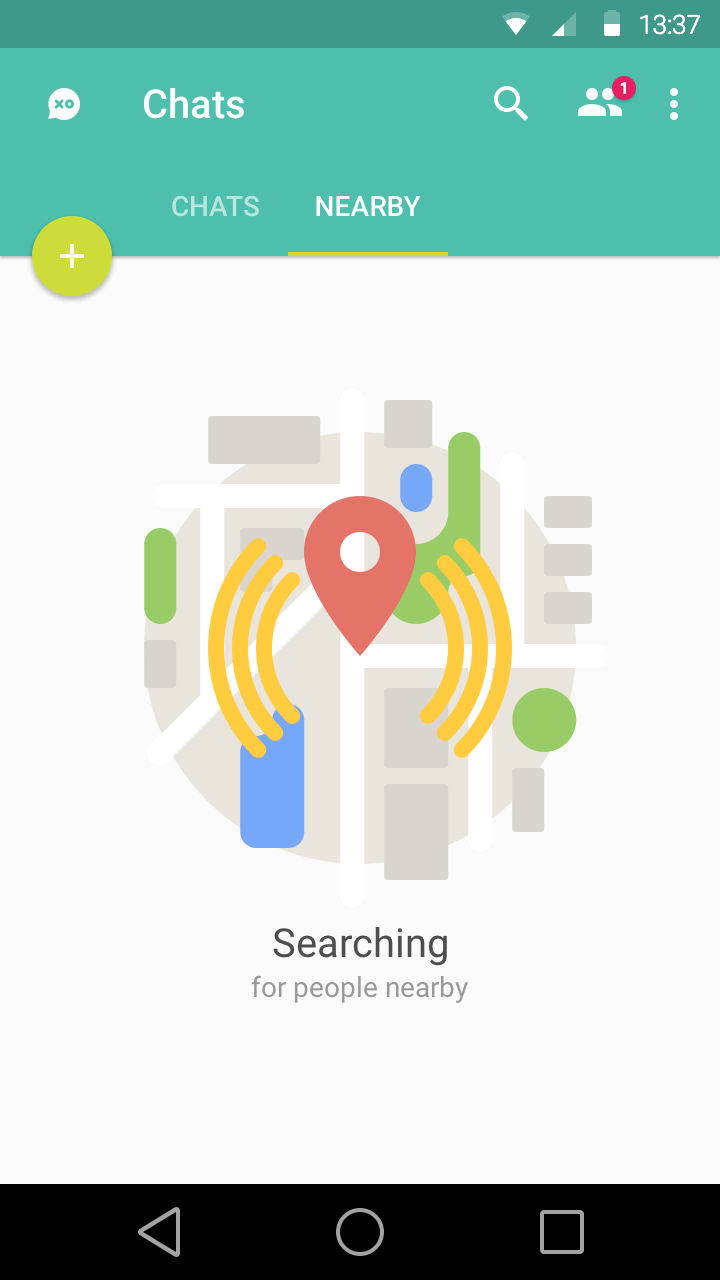
<style>
.page{position:relative;width:720px;height:1280px;background:#fafafa}
.page>*{position:absolute;margin:0}
.t1{font:26.1px "Roboto-Light";color:#ffffff}
.t2{font:40px "Roboto-Medium";color:#ffffff}
.t3{font:16px "Roboto-Medium";color:#ffffff}
.t4{font:28px "Roboto-Medium";color:#b8e5de;text-transform:uppercase}
.t5{font:28px "Roboto-Medium";color:#ffffff;text-transform:uppercase}
.t6{font:40px "Roboto-Regular";color:#4d4d4d}
.t7{font:28px "Roboto-Regular";color:#999999}
</style>
<div class="page">
<p class="t1" style="left:640px;top:14px;width:60px;height:21px">13:37</p>
<p class="t2" style="left:144px;top:88px;width:100px;height:31px">Chats</p>
<p class="t3" style="left:620px;top:82px;width:6px;height:12px">1</p>
<p class="t4" style="left:172px;top:195px;width:87px;height:22px">Chats</p>
<p class="t5" style="left:316px;top:196px;width:105px;height:20px">Nearby</p>
<p class="t6" style="left:273px;top:927px;width:174px;height:39px">Searching</p>
<p class="t7" style="left:251px;top:975px;width:217px;height:28px">for people nearby</p>
</div>
